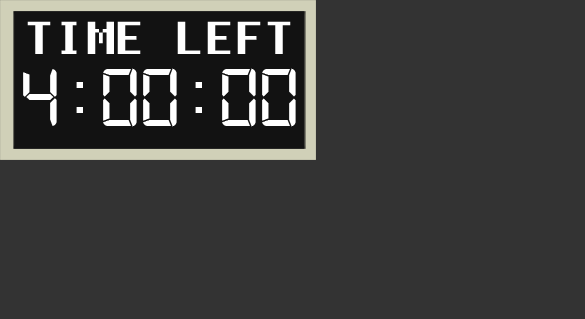
<style>
.page{position:relative;width:585px;height:319px;background:#333333}
.page>*{position:absolute;margin:0}
.t1{font:45.8px "Fixedsys";color:#ffffff;scale:1.05 1}
.t2{font:87.4px "Digital-7Mono";color:#ffffff}
</style>
<div class="page">
<p class="t1" style="left:27px;top:21px;width:264px;height:33px">TIME LEFT</p>
<p class="t2" style="left:23px;top:68px;width:273px;height:59px">4:00:00</p>
</div>
